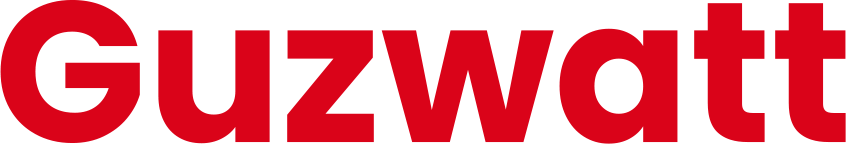
<style>
.page{position:relative;width:846px;height:144px;background:#ffffff}
.page>*{position:absolute;margin:0}
.t1{font:200px "Poppins-Bold";color:#da0319}
</style>
<div class="page">
<p class="t1" style="left:0px;top:0px;width:846px;height:144px">Guzwatt</p>
</div>
